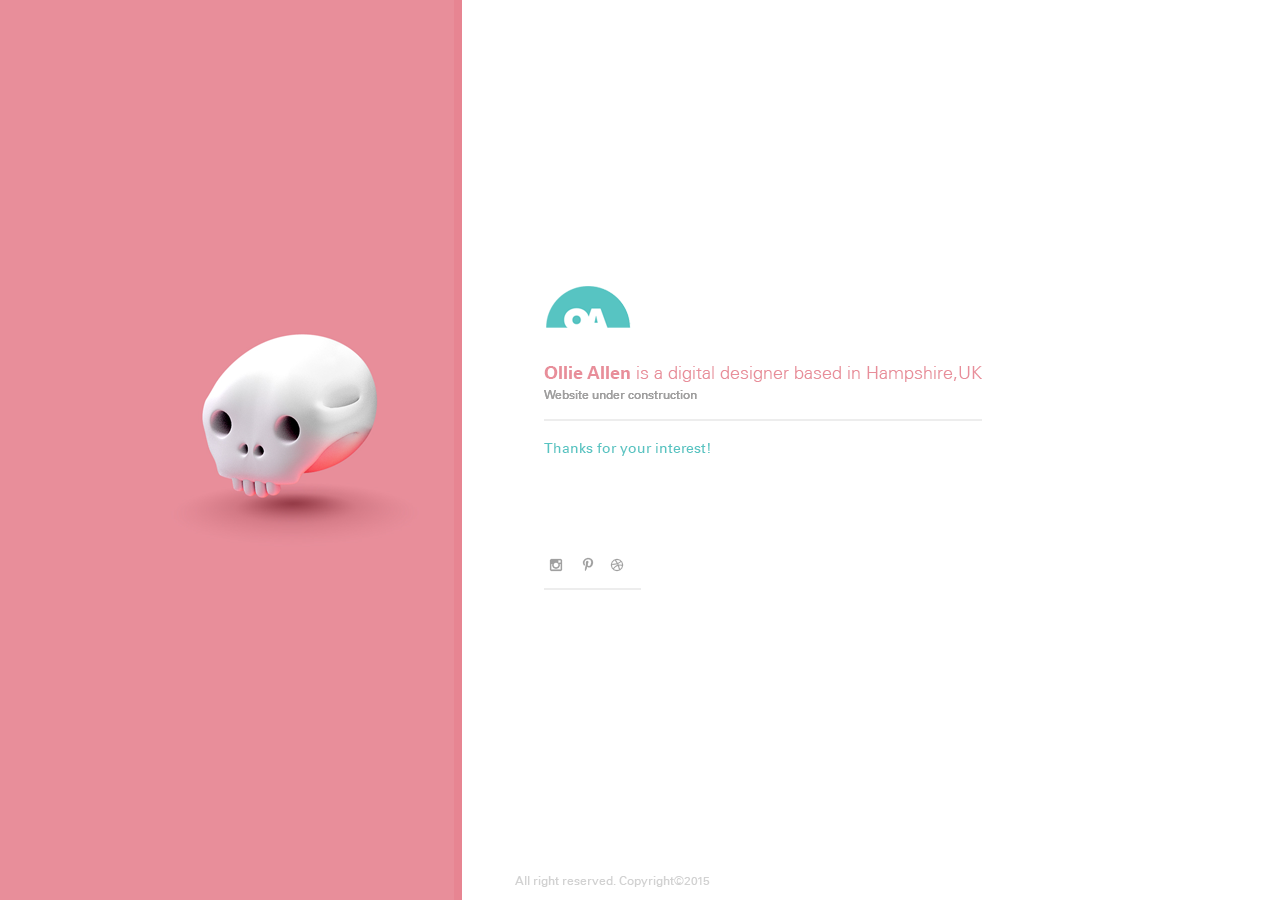
<style>
.page{position:relative;width:1280px;height:900px;background:#ffffff}
.page>*{position:absolute;margin:0}
.t1{font:18px "UniversLT-Light";color:#e88e9a}
.t2{font:18px "UniversLT-Bold";color:#e88e9a}
.t3{font:12px "UniversLT";color:#a09f9f}
.t4{font:14px "UniversLT";color:#57c4c2}
.t5{font:12px "UniversLT";color:#d2d2d2}
</style>
<div class="page">
<p class="t1" style="left:544px;top:366px;width:438px;height:16px"><span class="t2">Ollie Allen</span> is a digital designer based in Hampshire,UK</p>
<p class="t3" style="left:544px;top:390px;width:153px;height:9px">Website under construction</p>
<p class="t3" style="left:544px;top:390px;width:153px;height:9px">Website under construction</p>
<p class="t4" style="left:544px;top:443px;width:166px;height:13px">Thanks for your interest!</p>
<p class="t5" style="left:515px;top:876px;width:195px;height:11px">All right reserved. Copyright©2015</p>
</div>
